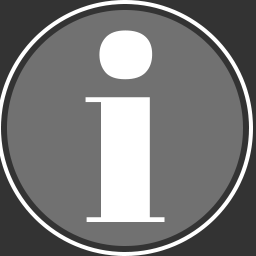
<style>
.page{position:relative;width:256px;height:256px;background:#717171}
.page>*{position:absolute;margin:0}
.t1{font:262.5px "AbrilFatface-Regular";letter-spacing:0.02em;color:#ffffff}
</style>
<div class="page">
<p class="t1" style="left:85px;top:30px;width:80px;height:192px">i</p>
</div>
